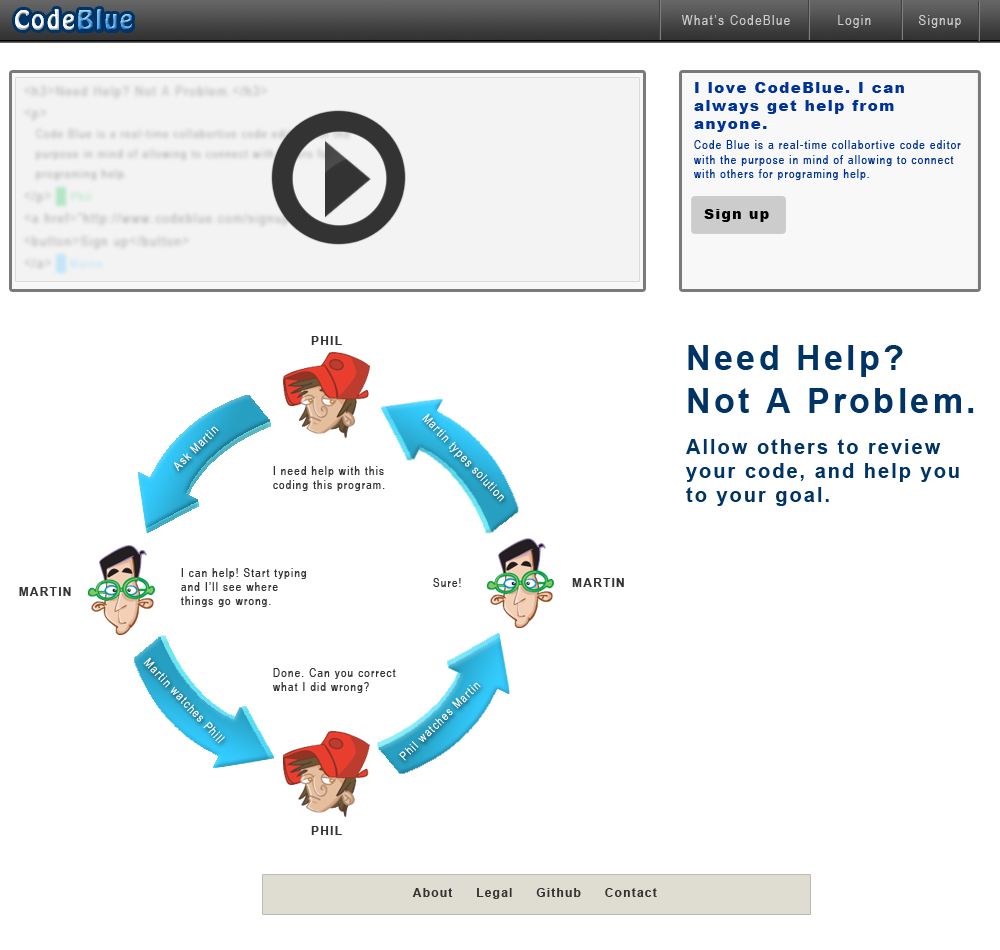
<style>
.page{position:relative;width:1000px;height:950px;background:#ffffff}
.page>*{position:absolute;margin:0}
.t1{font:24px "HoboStd";letter-spacing:0.1em}
.t2{font:14px "ArialNarrow";letter-spacing:0.1em;color:#cccccc}
.t3{font:12px "ArialNarrow";letter-spacing:0.1em;color:#003399}
.t4{font:15px "Arial-Black";letter-spacing:0.1em;color:#003399}
.t5{font:14px "Arial-Black";letter-spacing:0.1em;color:#000000}
.t6{font:12px "Arial-BoldMT";letter-spacing:0.1em;color:#333333}
.t7{font:20px "Arial-BoldMT";letter-spacing:0.1em;color:#003366}
.t8{font:34px "Arial-BoldMT";letter-spacing:0.1em;color:#003366}
.t9{font:12px "ArialNarrow";letter-spacing:0.1em;color:#ffffff}
.t10{font:12px "ArialNarrow";letter-spacing:0.1em;color:#333333}
</style>
<div class="page">
<p class="t1" style="left:15px;top:9px;width:117px;height:21px">CodeBlue</p>
<p class="t2" style="left:681px;top:15px;width:280px;height:13px">What’s CodeBlue          Login          Signup</p>
<p class="t3" style="left:694px;top:82px;width:267px;height:98px"><span class="t4">I love CodeBlue. I can always get help from anyone.<br></span>Code Blue is a real-time collabortive code editor with the purpose in mind of allowing to connect with others for programing help.</p>
<p class="t5" style="left:704px;top:209px;width:65px;height:13px">Sign up</p>
<p class="t6" style="left:311px;top:336px;width:31px;height:9px">PHIL</p>
<p class="t7" style="left:686px;top:345px;width:288px;height:161px"><span class="t8">Need Help?<br>Not A Problem.<br></span>Allow others to review your code, and help you to your goal.</p>
<p class="t9" style="left:174px;top:426px;width:45px;height:45px;rotate:-45deg">Ask Martin</p>
<p class="t10" style="left:273px;top:466px;width:112px;height:25px">I need help with this coding this program.</p>
<p class="t10" style="left:181px;top:568px;width:125px;height:39px">I can help! Start typing and I’ll see where things go wrong.</p>
<p class="t10" style="left:433px;top:578px;width:28px;height:9px">Sure!</p>
<p class="t6" style="left:572px;top:578px;width:52px;height:9px">MARTIN</p>
<p class="t6" style="left:19px;top:587px;width:52px;height:9px">MARTIN</p>
<p class="t10" style="left:273px;top:668px;width:123px;height:25px">Done. Can you correct what I did wrong?</p>
<p class="t6" style="left:311px;top:826px;width:31px;height:9px">PHIL</p>
<p class="t6" style="left:412px;top:888px;width:245px;height:11px">About     Legal     Github     Contact</p>
</div>
